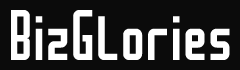
<style>
.page{position:relative;width:240px;height:70px;background:#0b0b0b}
.page>*{position:absolute;margin:0}
.t1{font:50px "Mocha-Book";color:#ffffff}
</style>
<div class="page">
<p class="t1" style="left:11px;top:10px;width:219px;height:50px">BizGlories</p>
</div>
